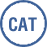
<style>
.page{position:relative;width:47px;height:47px;background:#ffffff}
.page>*{position:absolute;margin:0}
.t1{font:17.9px "HelveticaLTStd-BoldCond";color:#3b5f97}
</style>
<div class="page">
<p class="t1" style="left:9px;top:17px;width:28px;height:15px">CAT</p>
</div>
